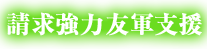
<style>
.page{position:relative;width:207px;height:49px}
.page>*{position:absolute;margin:0}
.t1{font:24px "RyuminPr6N-ExBold";color:#ffffff;font-weight:bold}
</style>
<div class="page">
<p class="t1" style="left:6px;top:12px;width:196px;height:24px">請求強力友軍支援</p>
</div>
